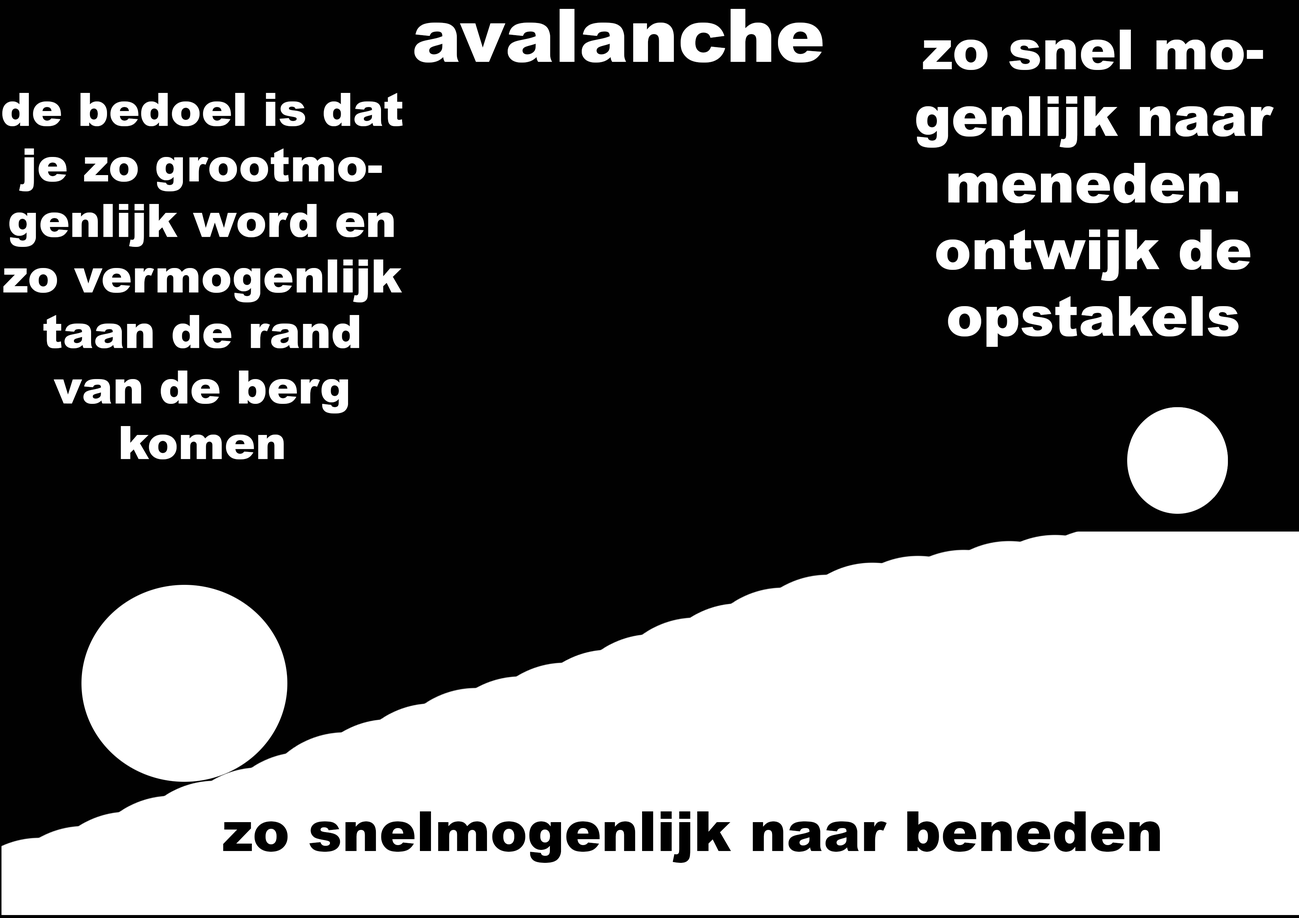
<style>
.page{position:relative;width:1299px;height:918px;background:#010101}
.page>*{position:absolute;margin:0}
.t1{font:74px "Arial-Black";color:#ffffff}
.t2{font:55.5px "Arial-Black";color:#ffffff}
.t3{font:46.3px "Arial-Black";color:#ffffff}
.t4{font:55.5px "Arial-Black";color:#000000}
</style>
<div class="page">
<p class="t1" style="left:414px;top:9px;width:409px;height:54px">avalanche</p>
<p class="t2" style="left:916px;top:30px;width:358px;height:317px;text-align:center">zo snel mogenlijk naar meneden. <br>ontwijk de opstakels</p>
<p class="t3" style="left:2px;top:93px;width:401px;height:366px;text-align:center">de bedoel is dat je zo grootmogenlijk word en zo vermogenlijk taan de rand van de berg komen</p>
<p class="t4" style="left:223px;top:812px;width:937px;height:51px">zo snelmogenlijk naar beneden</p>
</div>
